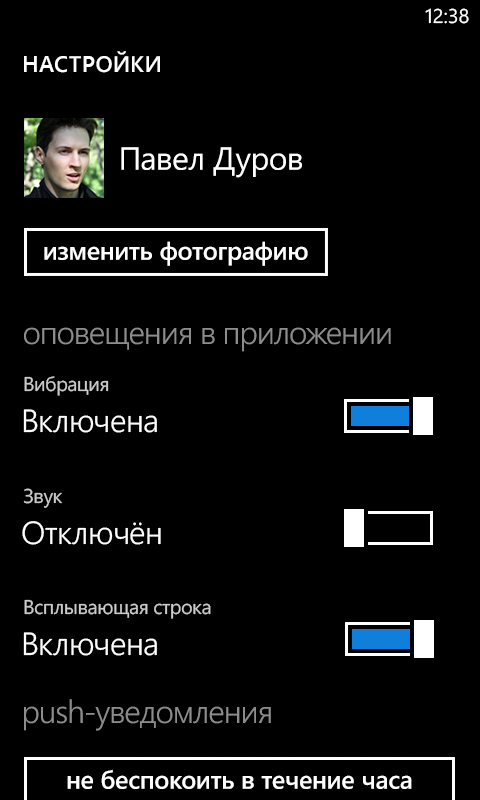
<style>
.page{position:relative;width:480px;height:800px;background:#000000}
.page>*{position:absolute;margin:0}
.t1{font:20px "SegoeWP";color:#ffffff}
.t2{font:22.7px "SegoeWP-Semibold";letter-spacing:0.025em;color:#ffffff;text-transform:uppercase}
.t3{font:32px "SegoeWP";letter-spacing:-0.01em;color:#ffffff}
.t4{font:25.4px "SegoeWP-Semibold";letter-spacing:-0.01em;color:#ffffff}
.t5{font:20px "SegoeWP";letter-spacing:-0.025em;color:#cccccc}
.t6{font:32px "SegoeWP-SemiLight";letter-spacing:-0.01em;color:#ffffff}
</style>
<div class="page">
<p class="t1" style="left:425px;top:8px;width:44px;height:16px">12:38</p>
<p class="t2" style="left:24px;top:51px;width:136px;height:22px">настройки</p>
<p class="t3" style="left:121px;top:147px;width:181px;height:31px">Павел Дуров</p>
<p class="t4" style="left:44px;top:241px;width:264px;height:25px">изменить фотографию</p>
<p class="t5" style="left:24px;top:376px;width:85px;height:20px">Вибрация</p>
<p class="t6" style="left:23px;top:409px;width:134px;height:24px">Включена</p>
<p class="t5" style="left:23px;top:488px;width:40px;height:20px">Звук</p>
<p class="t6" style="left:22px;top:521px;width:139px;height:24px">Отключён</p>
<p class="t5" style="left:24px;top:599px;width:187px;height:20px">Всплывающая строка</p>
<p class="t6" style="left:23px;top:632px;width:134px;height:24px">Включена</p>
<p class="t4" style="left:67px;top:769px;width:345px;height:20px">не беспокоить в течение часа</p>
</div>
